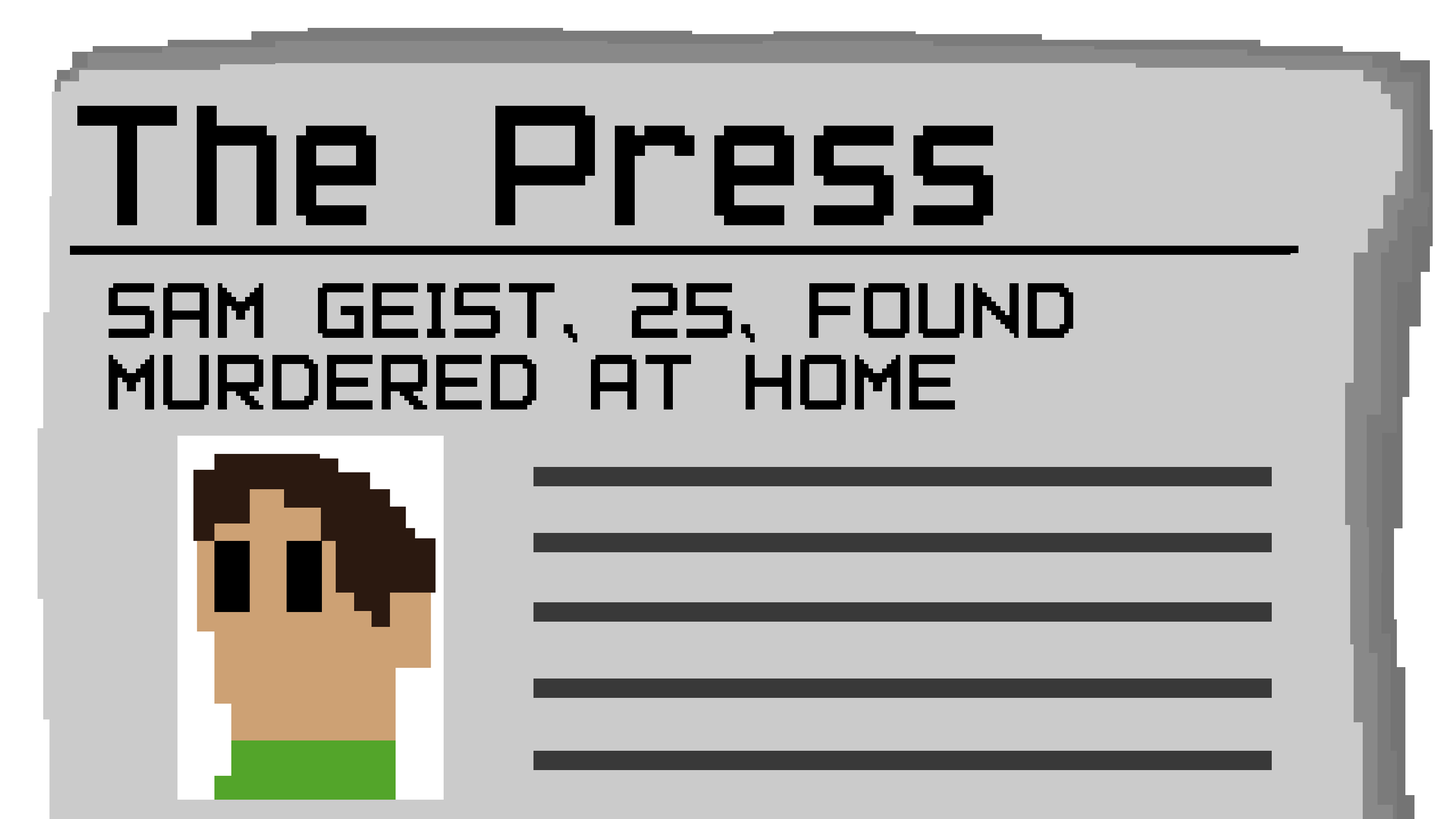
<style>
.page{position:relative;width:1456px;height:819px;background:#cbcbcb}
.page>*{position:absolute;margin:0}
.t1{font:199.1px "PixelFont-7";color:#000000}
.t2{font:91px/71.7px "PixelFont-7";color:#000000}
</style>
<div class="page">
<p class="t1" style="left:77px;top:106px;width:916px;height:119px">The Press</p>
<p class="t2" style="left:109px;top:283px;width:964px;height:126px">SAM GEIST, 25, FOUND <br>MURDERED AT HOME</p>
</div>
